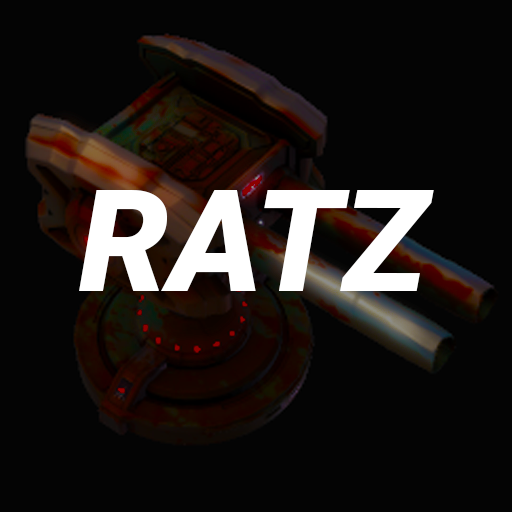
<style>
.page{position:relative;width:512px;height:512px;background:#040404}
.page>*{position:absolute;margin:0}
.t1{font:142px "Roboto-BlackItalic";color:#ffffff}
</style>
<div class="page">
<p class="t1" style="left:79px;top:190px;width:355px;height:101px">RATZ</p>
</div>
